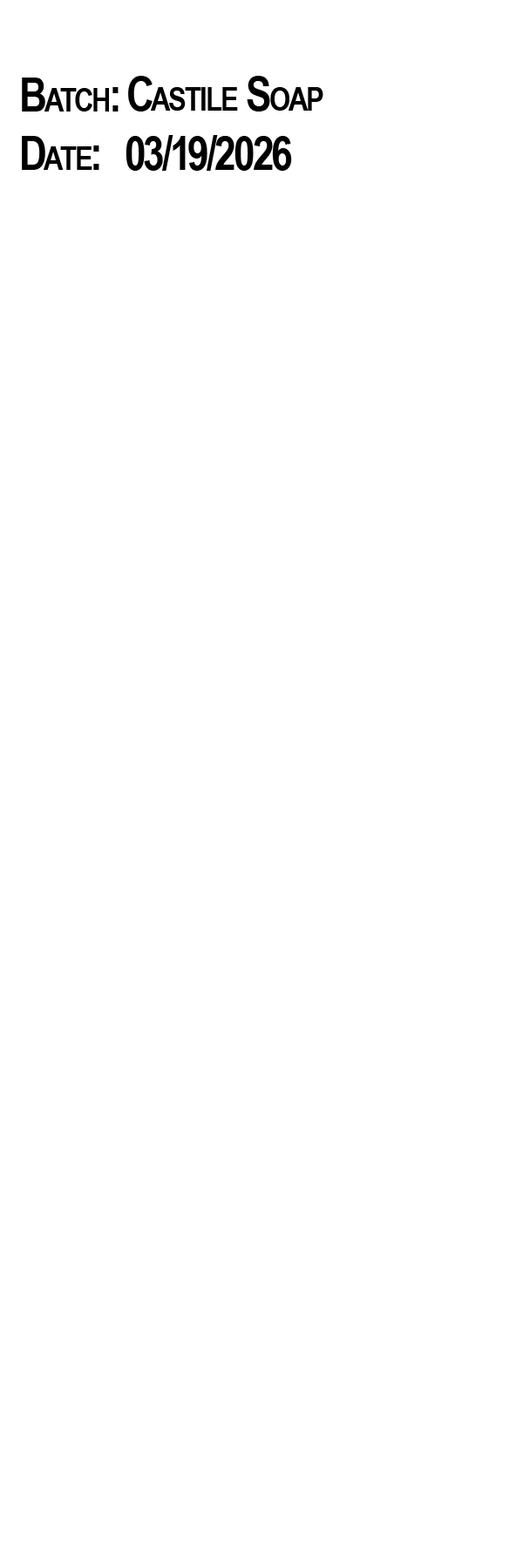
<style>
.page{position:relative;width:523px;height:1568px;background:#ffffff}
.page>*{position:absolute;margin:0}
.t1{font:47px "ArialNarrow-Bold";letter-spacing:-0.04em;color:#000000;font-variant:small-caps}
</style>
<div class="page">
<p class="t1" style="left:22px;top:78px;width:96px;height:34px">Batch:</p>
<p class="t1" style="left:128px;top:76px;width:195px;height:36px">Castile Soap</p>
<p class="t1" style="left:22px;top:136px;width:77px;height:34px">Date:</p>
<p class="t1" style="left:125px;top:135px;width:167px;height:36px">03/19/2026</p>
</div>
